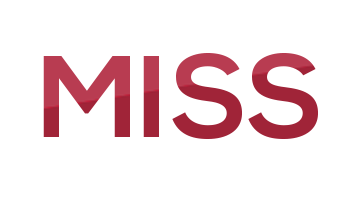
<style>
.page{position:relative;width:362px;height:198px;background:#ffffff}
.page>*{position:absolute;margin:0}
.t1{font:116.2px "NexaBold"}
</style>
<div class="page">
<p class="t1" style="left:43px;top:53px;width:275px;height:86px">MISS</p>
</div>
